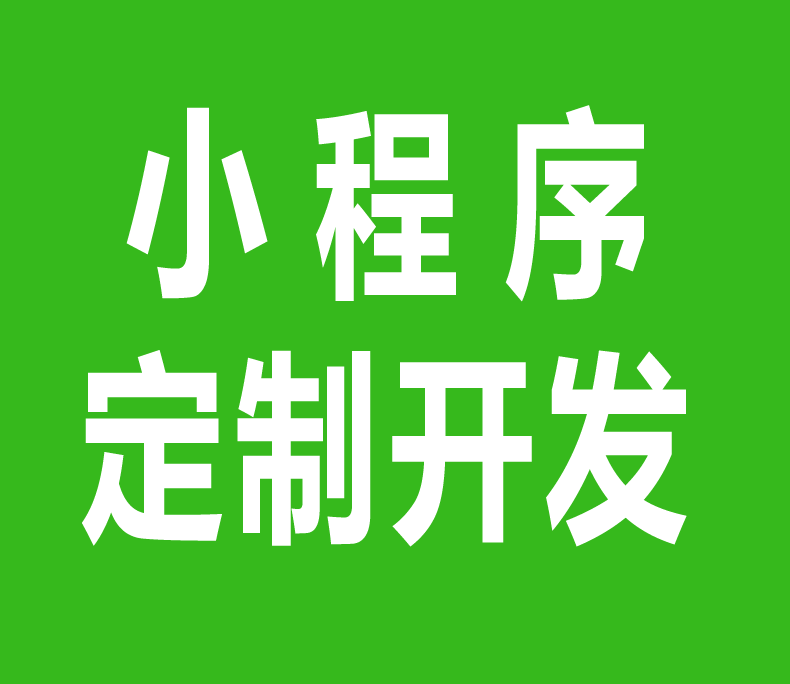
<style>
.page{position:relative;width:790px;height:684px;background:#36b91c}
.page>*{position:absolute;margin:0}
.t1{font:201.6px "MicrosoftYaHei-Bold";letter-spacing:0.01em;color:#ffffff;scale:0.71 1}
.t2{font:201.6px "MicrosoftYaHei-Bold";letter-spacing:0.075em;color:#ffffff;scale:0.71 1}
</style>
<div class="page">
<p class="t1" style="left:82px;top:105px;width:605px;height:442px">小 程 序<br><br><span class="t2">定制开发</span></p>
</div>
